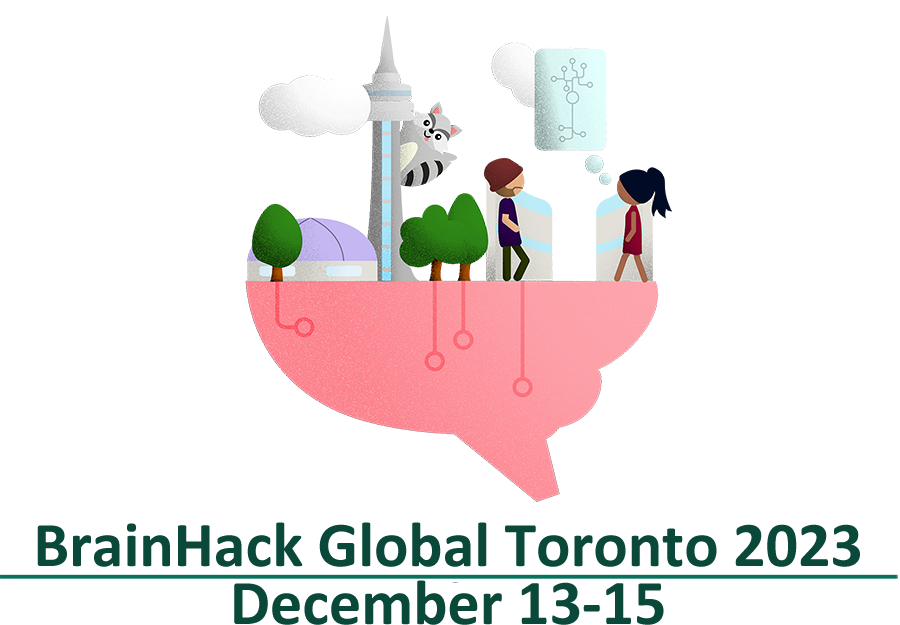
<style>
.page{position:relative;width:900px;height:625px;background:#ffffff}
.page>*{position:absolute;margin:0}
.t1{font:64px "Calibri-Bold";color:#0a4839}
</style>
<div class="page">
<p class="t1" style="left:37px;top:522px;width:823px;height:45px">BrainHack Global Toronto 2023</p>
<p class="t1" style="left:234px;top:580px;width:430px;height:45px">December 13-15</p>
</div>
